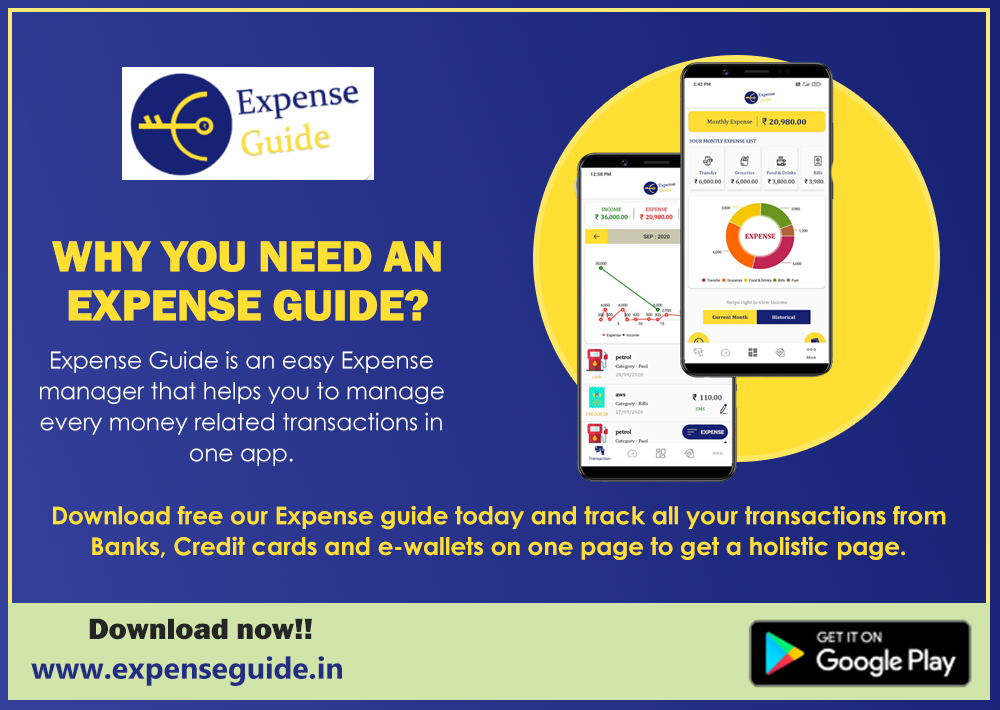
<style>
.page{position:relative;width:1000px;height:710px}
.page>*{position:absolute;margin:0}
.t1{font:45.5px/49px "FranklinGothic-Heavy";letter-spacing:-0.005em;color:#ffdf33;text-transform:uppercase}
.t2{font:23.5px/31px "CenturyGothic";letter-spacing:-0.005em;color:#ffffff}
.t3{font:24.5px/31px "CenturyGothic-Bold";letter-spacing:-0.005em;color:#ffdf33}
.t4{font:30.5px "FranklinGothic-Heavy";letter-spacing:-0.005em;color:#252525}
.t5{font:30.5px "Gadugi-Bold";letter-spacing:-0.005em;color:#232e83}
</style>
<div class="page">
<p class="t1" style="left:52px;top:240px;width:389px;height:81px;text-align:center">Why you need an Expense guide?</p>
<p class="t2" style="left:40px;top:351px;width:404px;height:115px;text-align:center">Expense Guide is an easy Expense manager that helps you to manage every money related transactions in one app.</p>
<p class="t3" style="left:53px;top:506px;width:893px;height:54px;text-align:center">Download free our Expense guide today and track all your transactions from Banks, Credit cards and e-wallets on one page to get a holistic page.</p>
<p class="t4" style="left:89px;top:618px;width:223px;height:22px">Download now!!</p>
<p class="t5" style="left:31px;top:656px;width:311px;height:30px">www.expenseguide.in</p>
</div>
